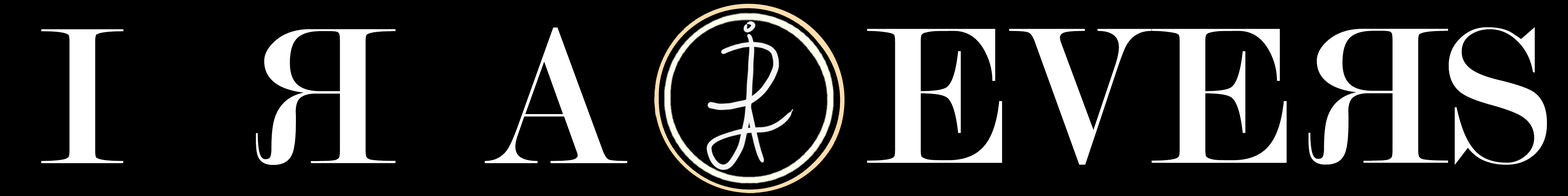
<style>
.page{position:relative;width:1568px;height:196px;background:#000000}
.page>*{position:absolute;margin:0}
.t1{font:207.4px "Modern-Regular";color:#ffffff}
</style>
<div class="page">
<p class="t1" style="left:41px;top:27px;width:586px;height:136px">I       A</p>
<p class="t1" style="left:256px;top:29px;width:139px;height:136px;rotate:180deg">R</p>
<p class="t1" style="left:867px;top:27px;width:680px;height:138px">EVE   S</p>
<p class="t1" style="left:1308px;top:29px;width:140px;height:136px;rotate:180deg">R</p>
</div>
